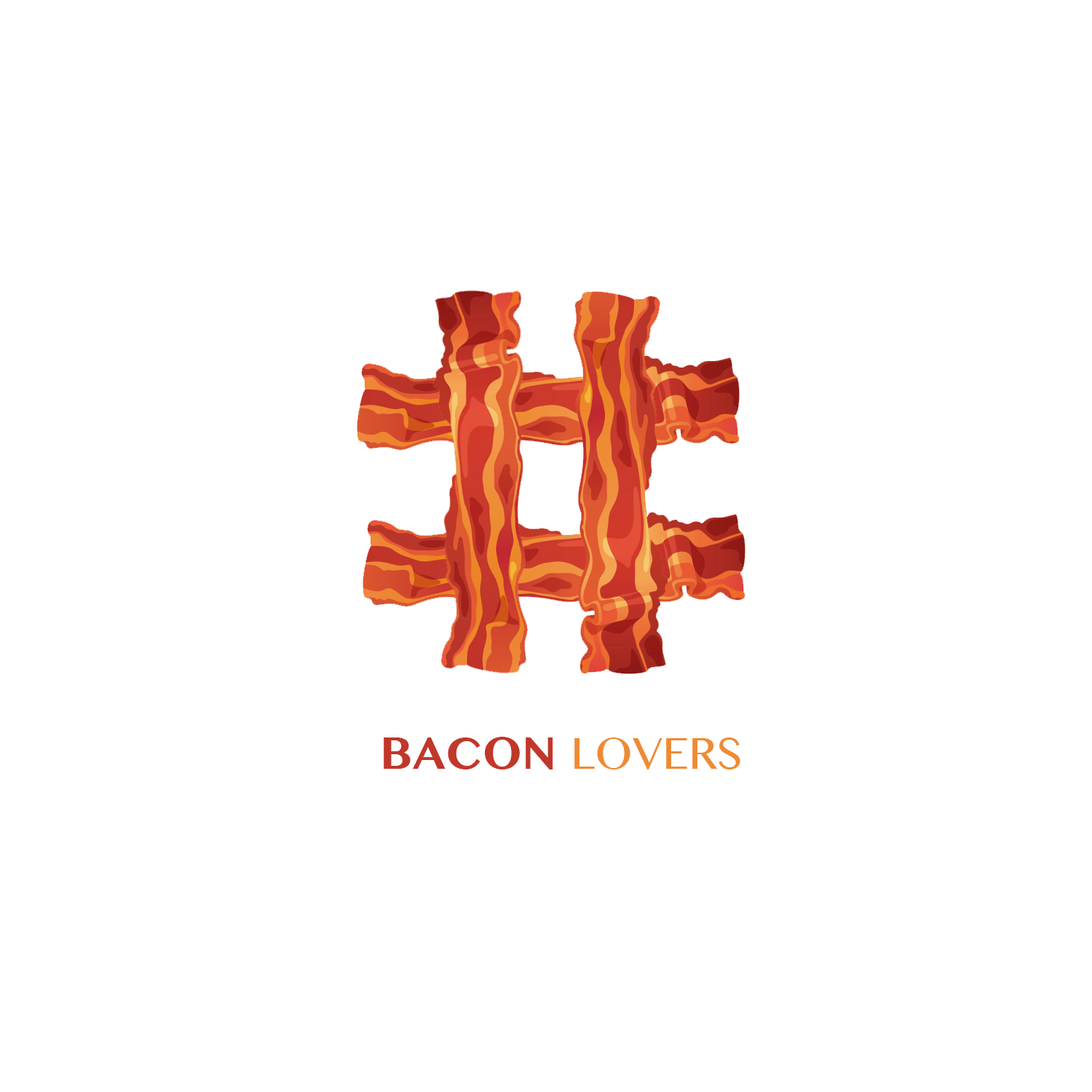
<style>
.page{position:relative;width:1092px;height:1092px;background:#ffffff}
.page>*{position:absolute;margin:0}
.t1{font:49.2px "KannadaMN";color:#ee8b33}
.t2{font:49.2px "KannadaMN-Bold";color:#c1372a}
</style>
<div class="page">
<p class="t1" style="left:384px;top:737px;width:356px;height:32px"><span class="t2">BACON </span>LOVERS</p>
</div>
